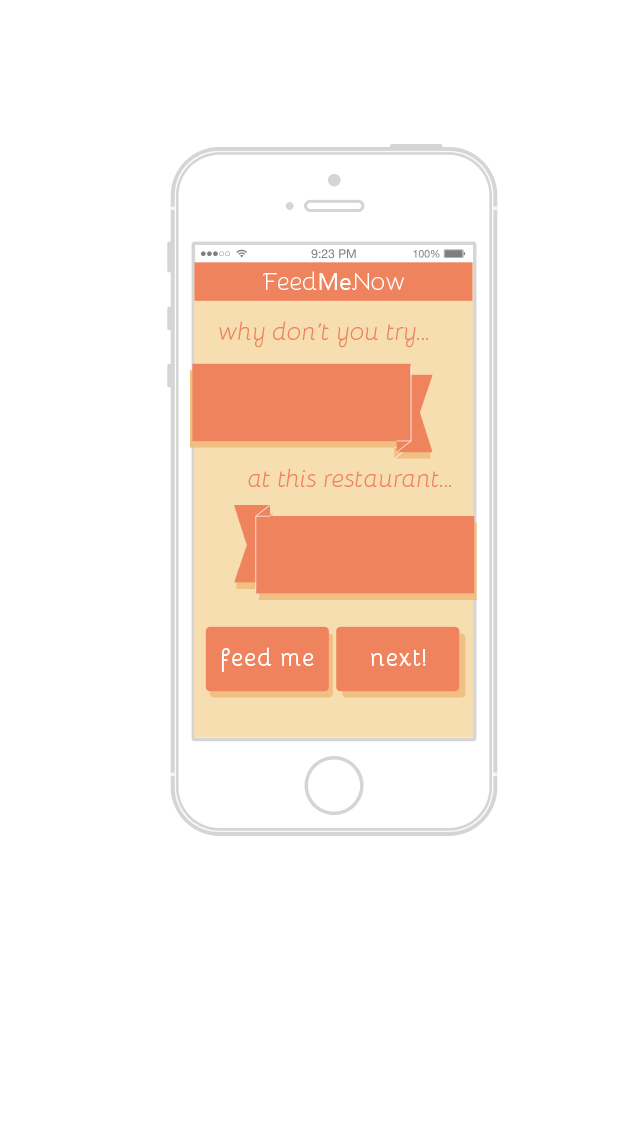
<style>
.page{position:relative;width:640px;height:1136px;background:#ffffff}
.page>*{position:absolute;margin:0}
.t1{font:24.4px "Bellota-Light";color:#ffffff}
.t2{font:24.4px "NirmalaUI";color:#ffffff}
.t3{font:24.4px "Bellota-LightItalic";color:#ee835e}
.t4{font:24.4px "Bellota-Bold";color:#ffffff}
</style>
<div class="page">
<p class="t1" style="left:263px;top:271px;width:141px;height:19px">Feed<span class="t2">Me</span>Now</p>
<p class="t3" style="left:219px;top:321px;width:209px;height:27px">why don’t you try...</p>
<p class="t3" style="left:248px;top:468px;width:203px;height:19px">at this restaurant...</p>
<p class="t4" style="left:222px;top:647px;width:92px;height:25px">feed me</p>
<p class="t4" style="left:371px;top:649px;width:55px;height:17px">next!</p>
</div>
